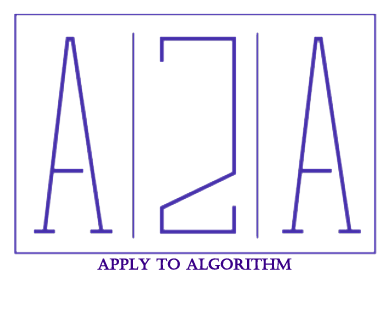
<style>
.page{position:relative;width:390px;height:310px;background:#ffffff}
.page>*{position:absolute;margin:0}
.t1{font:14.7px "Castellar";color:#390087;font-weight:bold}
</style>
<div class="page">
<p class="t1" style="left:97px;top:258px;width:195px;height:12px">APPLY TO ALGORITHM</p>
</div>
